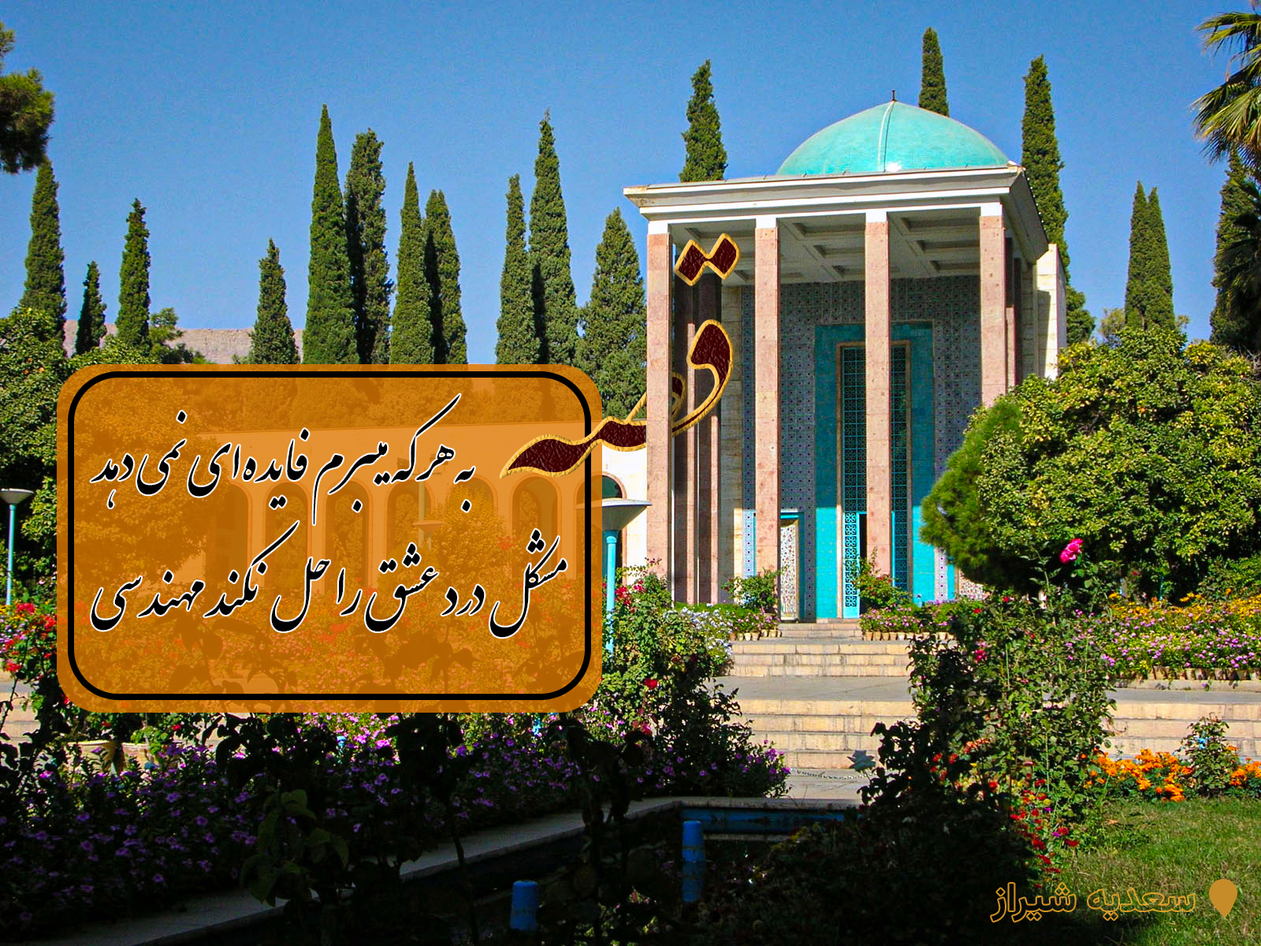
<style>
.page{position:relative;width:1261px;height:946px}
.page>*{position:absolute;margin:0}
.t1{font:59.1px "IranNastaliq";color:#000000}
.t2{font:62.4px "IranNastaliq";color:#000000}
</style>
<div class="page">
<p class="t1" style="left:91px;top:394px;width:383px;height:131px;text-align:right">به هر که میبرم فایده‌ای نمی دهد</p>
<p class="t2" style="left:91px;top:521px;width:476px;height:117px;text-align:right">مشکل درد عشق را حل نکند مهندسی</p>
</div>
